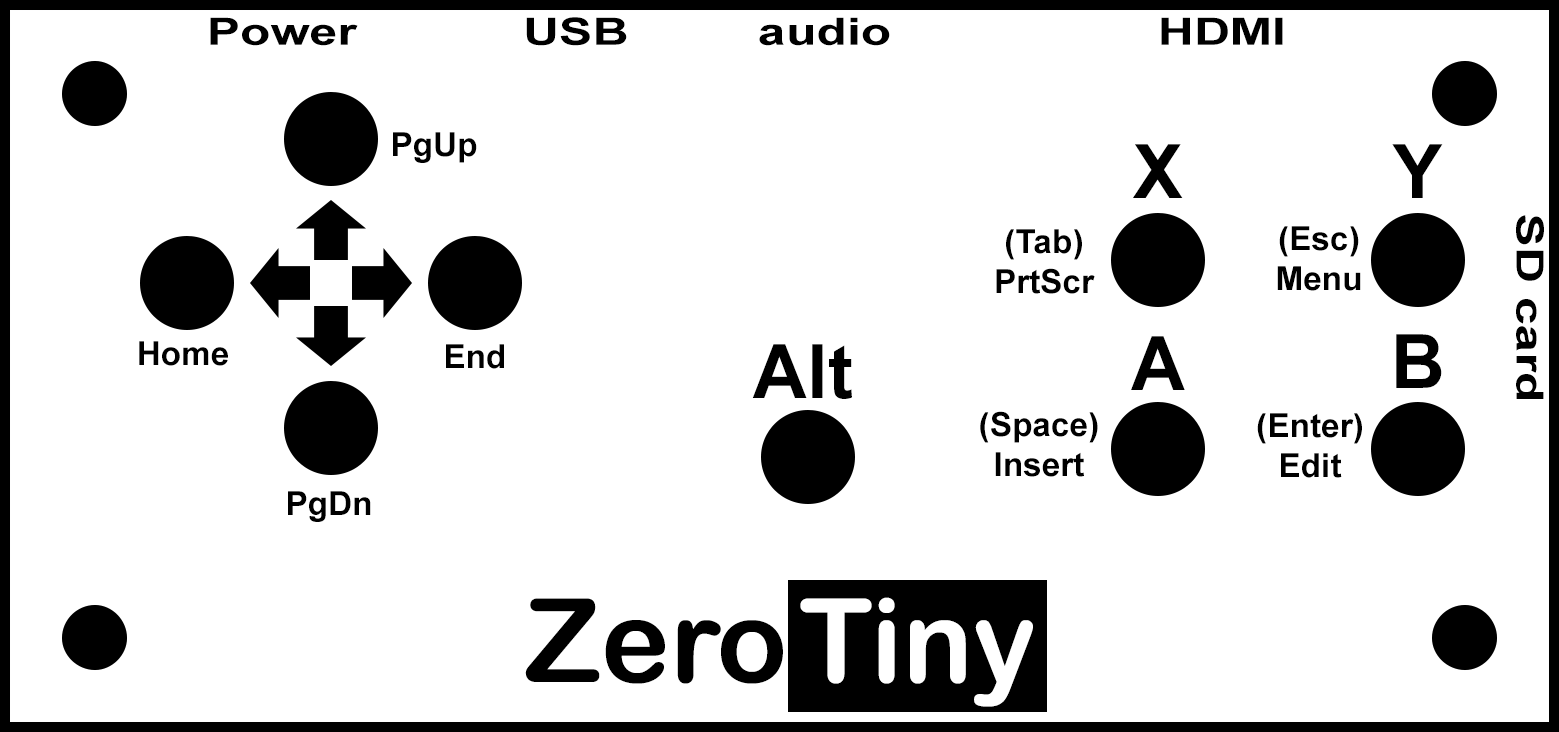
<style>
.page{position:relative;width:1559px;height:732px;background:#ffffff}
.page>*{position:absolute;margin:0}
.t1{font:37.5px "Arial-BoldMT";color:#000000;scale:1.33 1}
.t2{font:33.3px "Arial-BoldMT";color:#000000}
.t3{font:75px "Arial-BoldMT";color:#000000}
</style>
<div class="page">
<p class="t1" style="left:210px;top:17px;width:148px;height:29px">Power</p>
<p class="t1" style="left:526px;top:17px;width:101px;height:29px">USB</p>
<p class="t1" style="left:759px;top:17px;width:131px;height:29px">audio</p>
<p class="t1" style="left:1161px;top:17px;width:122px;height:28px">HDMI</p>
<p class="t2" style="left:393px;top:132px;width:84px;height:31px">PgUp</p>
<p class="t3" style="left:1133px;top:144px;width:50px;height:54px">X</p>
<p class="t3" style="left:1392px;top:144px;width:51px;height:54px">Y</p>
<p class="t1" style="left:1516px;top:215px;width:28px;height:184px;rotate:90deg">SD card</p>
<p class="t2" style="left:996px;top:229px;width:99px;height:65px;text-align:center">(Tab)<br>PrtScr</p>
<p class="t2" style="left:1277px;top:226px;width:84px;height:65px;text-align:center">(Esc)<br>Menu</p>
<p class="t2" style="left:139px;top:341px;width:89px;height:25px">Home</p>
<p class="t3" style="left:1131px;top:336px;width:54px;height:54px">A</p>
<p class="t3" style="left:1396px;top:334px;width:46px;height:54px">B</p>
<p class="t2" style="left:446px;top:344px;width:58px;height:25px">End</p>
<p class="t3" style="left:752px;top:344px;width:100px;height:55px">Alt</p>
<p class="t2" style="left:980px;top:411px;width:118px;height:66px;text-align:center">(Space)<br>Insert</p>
<p class="t2" style="left:1257px;top:413px;width:105px;height:65px;text-align:center">(Enter)<br>Edit</p>
<p class="t2" style="left:288px;top:491px;width:83px;height:31px">PgDn</p>
</div>
